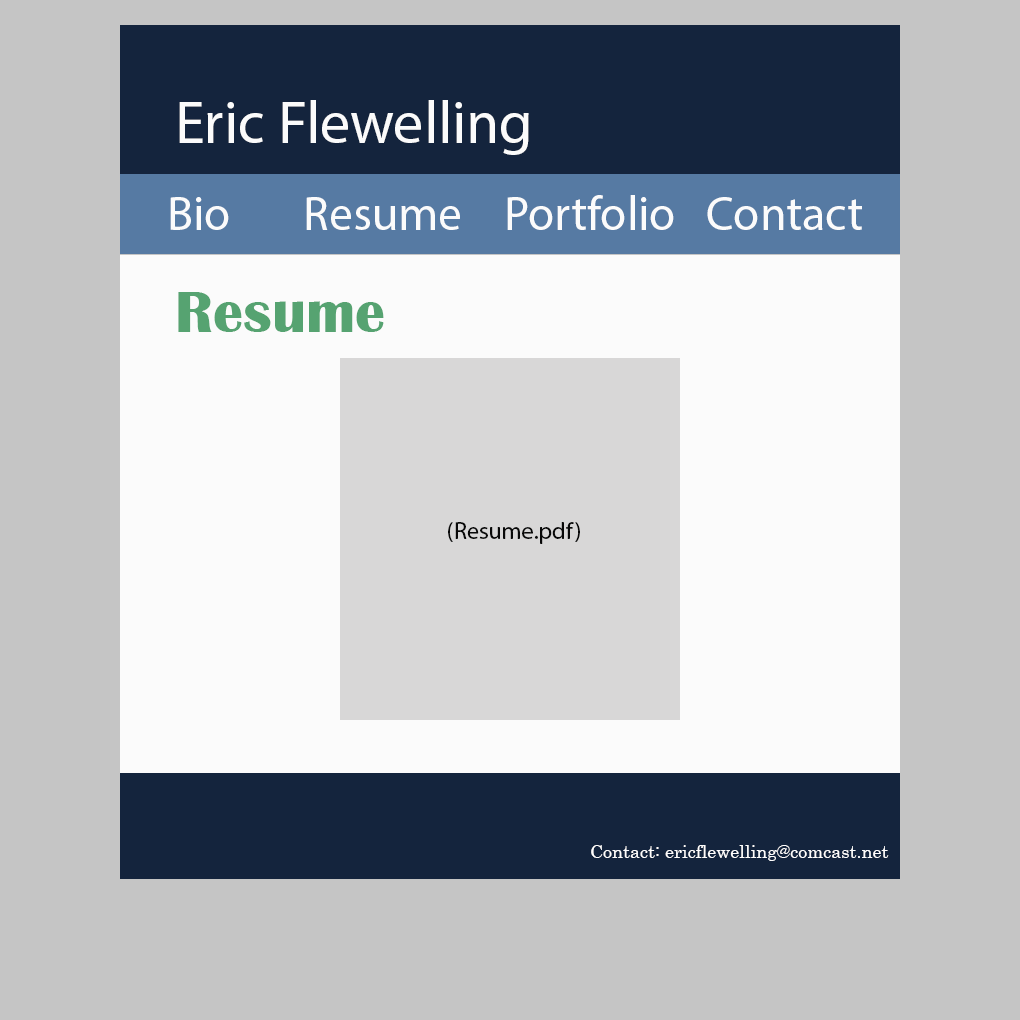
<style>
.page{position:relative;width:1020px;height:1020px;background:#c5c5c5}
.page>*{position:absolute;margin:0}
.t1{font:60px "MyriadPro-Regular";color:#fbfbfb}
.t2{font:48px "MyriadPro-Regular";color:#fbfbfb}
.t3{font:60px "BritannicBold";color:#56a371}
.t4{font:24px "MyriadPro-Regular";color:#080808}
.t5{font:18px "Century";color:#fffefe}
</style>
<div class="page">
<p class="t1" style="left:179px;top:100px;width:350px;height:55px">Eric Flewelling</p>
<p class="t2" style="left:170px;top:197px;width:59px;height:33px">Bio</p>
<p class="t2" style="left:306px;top:197px;width:154px;height:33px">Resume</p>
<p class="t2" style="left:507px;top:195px;width:167px;height:35px">Portfolio</p>
<p class="t2" style="left:707px;top:197px;width:155px;height:33px">Contact</p>
<p class="t3" style="left:178px;top:292px;width:206px;height:40px">Resume</p>
<p class="t4" style="left:448px;top:522px;width:132px;height:22px">(Resume.pdf)</p>
<p class="t5" style="left:591px;top:845px;width:298px;height:16px">Contact: ericflewelling@comcast.net</p>
</div>
